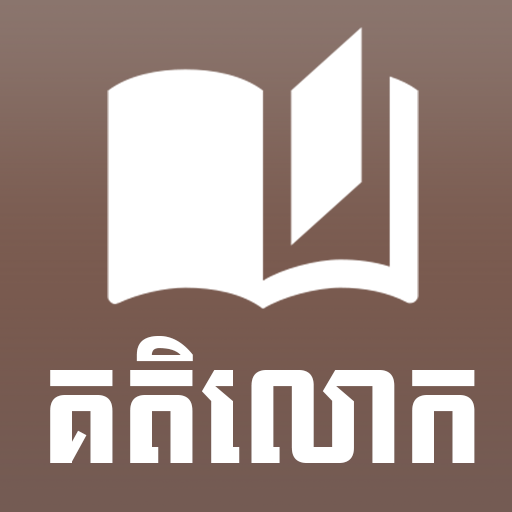
<style>
.page{position:relative;width:512px;height:512px;background:#ffffff}
.page>*{position:absolute;margin:0}
.t1{font:127px "Koulen";color:#ffffff}
</style>
<div class="page">
<p class="t1" style="left:50px;top:336px;width:425px;height:127px">គតិលោក</p>
</div>
